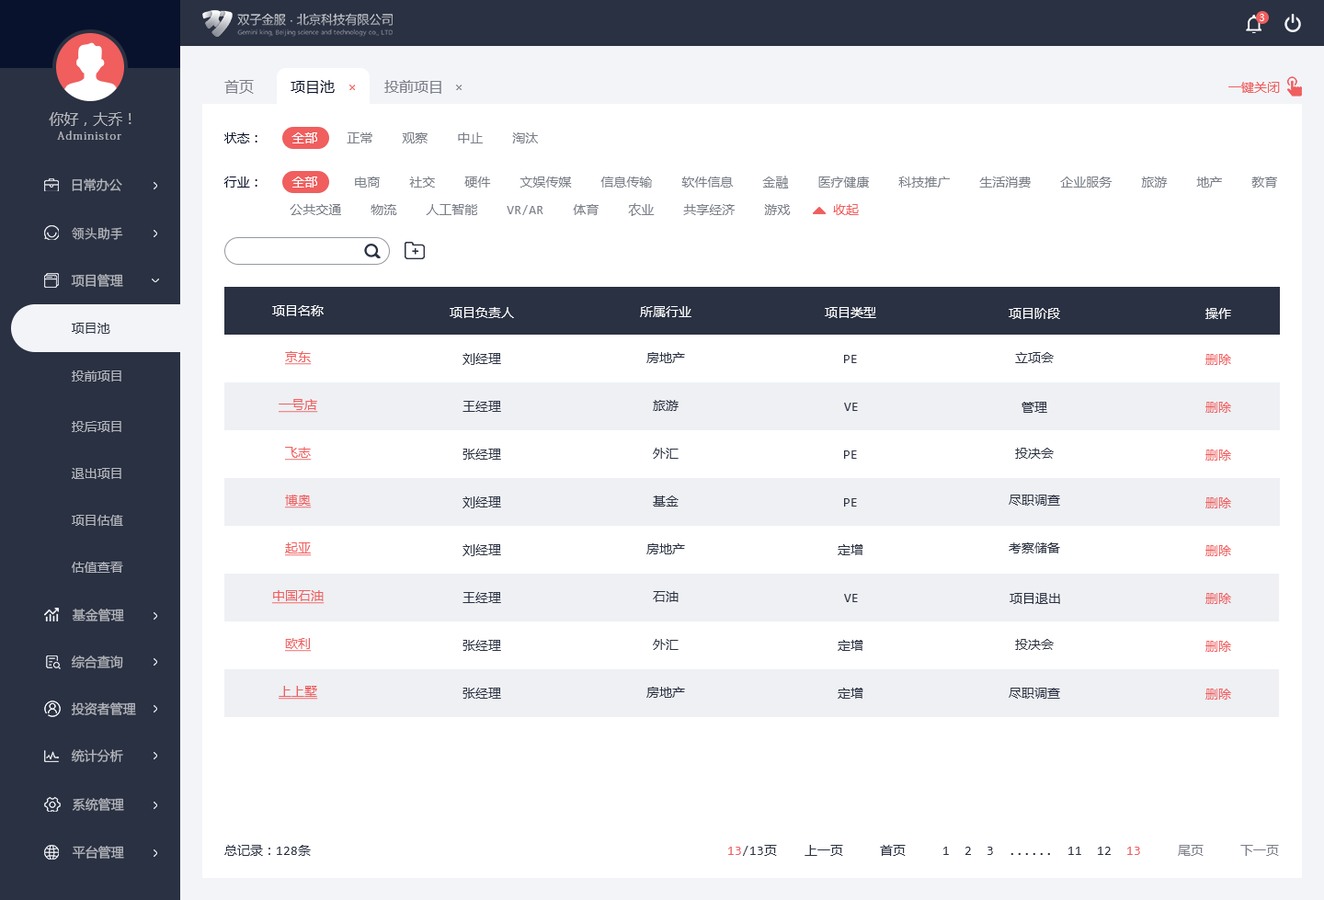
<style>
.page{position:relative;width:1324px;height:900px;background:#ffffff}
.page>*{position:absolute;margin:0}
.t1{font:9.2px "MicrosoftYaHeiUI";color:#ffffff}
.t2{font:14.7px "MicrosoftYaHeiMono";color:#7b7f88}
.t3{font:14.7px "MicrosoftYaHeiMono";color:#08122c}
.t4{font:12.9px "MicrosoftYaHeiMono";color:#f05e5e}
.t5{font:14.7px "MicrosoftYaHeiMono";color:#b4b7bd}
.t6{font:11px "AdobeFangsongStd-Regular";letter-spacing:0.1em;color:#b4b7bd}
.t7{font:12.9px "MicrosoftYaHeiMono";color:#7b7f88}
.t8{font:12.9px "MicrosoftYaHeiMono";color:#08122c}
.t9{font:12.9px "MicrosoftYaHeiMono";color:#ffffff}
.t10{font:12.9px "MicrosoftYaHeiUI";color:#b4b7bd}
.t11{font:12.9px/27.6px "MicrosoftYaHeiMono";color:#7b7f88}
.t12{font:12.9px/27.6px "MicrosoftYaHeiMono";color:#08122c}
.t13{font:12.9px/27.6px "MicrosoftYaHeiMono";color:#ffffff}
.t14{font:12.9px "PingFang-SC-Medium";color:#b4b7bd}
.t15{font:12.9px "MicrosoftYaHeiUI";color:#2a3142}
.t16{font:12.9px "MicrosoftYaHeiMono";color:#f05e5e;text-decoration:underline}
.t17{font:12.9px "MicrosoftYaHeiMono";color:#2a3142}
</style>
<div class="page">
<p class="t1" style="left:1260px;top:14px;width:5px;height:7px">3</p>
<p class="t2" style="left:224px;top:80px;width:30px;height:14px">首页</p>
<p class="t3" style="left:291px;top:80px;width:44px;height:14px">项目池</p>
<p class="t2" style="left:384px;top:80px;width:57px;height:14px">投前项目</p>
<p class="t4" style="left:1229px;top:82px;width:51px;height:11px">一键关闭</p>
<p class="t5" style="left:49px;top:112px;width:83px;height:14px">你好，大乔！</p>
<p class="t6" style="left:57px;top:131px;width:64px;height:9px">Administor</p>
<p class="t7" style="left:224px;top:132px;width:314px;height:11px"><span class="t8">状态：    </span><span class="t9">全部    </span>正常    观察    中止    淘汰</p>
<p class="t10" style="left:72px;top:178px;width:50px;height:13px">日常办公</p>
<p class="t11" style="left:224px;top:176px;width:1053px;height:40px"><span class="t12">行业：    </span><span class="t13">全部     </span>电商    社交    硬件    文娱传媒    信息传输    软件信息    金融    医疗健康    科技推广    生活消费    企业服务    旅游    地产    教育<br>         公共交通    物流    人工智能    VR/AR    体育    农业    共享经济    游戏</p>
<p class="t4" style="left:833px;top:204px;width:26px;height:11px">收起</p>
<p class="t14" style="left:72px;top:227px;width:51px;height:13px">领头助手</p>
<p class="t10" style="left:71px;top:274px;width:52px;height:14px">项目管理</p>
<p class="t9" style="left:272px;top:305px;width:52px;height:11px">项目名称</p>
<p class="t9" style="left:450px;top:307px;width:64px;height:11px">项目负责人</p>
<p class="t9" style="left:640px;top:306px;width:52px;height:11px">所属行业</p>
<p class="t9" style="left:825px;top:307px;width:51px;height:11px">项目类型</p>
<p class="t9" style="left:1009px;top:308px;width:51px;height:11px">项目阶段</p>
<p class="t9" style="left:1206px;top:308px;width:25px;height:11px">操作</p>
<p class="t15" style="left:72px;top:323px;width:38px;height:11px">项目池</p>
<p class="t16" style="left:285px;top:351px;width:27px;height:14px">京东</p>
<p class="t17" style="left:463px;top:353px;width:38px;height:12px">刘经理</p>
<p class="t17" style="left:647px;top:352px;width:38px;height:11px">房地产</p>
<p class="t17" style="left:1015px;top:352px;width:39px;height:11px">立项会</p>
<p class="t17" style="left:844px;top:355px;width:13px;height:8px">PE</p>
<p class="t4" style="left:1206px;top:354px;width:25px;height:11px">删除</p>
<p class="t10" style="left:72px;top:371px;width:49px;height:11px">投前项目</p>
<p class="t16" style="left:279px;top:399px;width:39px;height:14px">一号店</p>
<p class="t17" style="left:463px;top:401px;width:38px;height:11px">王经理</p>
<p class="t17" style="left:653px;top:400px;width:26px;height:11px">旅游</p>
<p class="t17" style="left:1022px;top:402px;width:26px;height:11px">管理</p>
<p class="t4" style="left:1206px;top:402px;width:25px;height:11px">删除</p>
<p class="t17" style="left:844px;top:403px;width:14px;height:8px">VE</p>
<p class="t10" style="left:72px;top:421px;width:49px;height:11px">投后项目</p>
<p class="t16" style="left:285px;top:447px;width:27px;height:14px">飞志</p>
<p class="t17" style="left:463px;top:449px;width:38px;height:11px">张经理</p>
<p class="t17" style="left:653px;top:448px;width:26px;height:11px">外汇</p>
<p class="t17" style="left:1015px;top:448px;width:39px;height:11px">投决会</p>
<p class="t4" style="left:1206px;top:450px;width:25px;height:11px">删除</p>
<p class="t17" style="left:844px;top:451px;width:13px;height:8px">PE</p>
<p class="t10" style="left:72px;top:468px;width:49px;height:11px">退出项目</p>
<p class="t16" style="left:285px;top:495px;width:27px;height:14px">博奥</p>
<p class="t17" style="left:463px;top:497px;width:38px;height:12px">刘经理</p>
<p class="t17" style="left:653px;top:496px;width:26px;height:11px">基金</p>
<p class="t17" style="left:1009px;top:495px;width:51px;height:11px">尽职调查</p>
<p class="t4" style="left:1206px;top:498px;width:25px;height:11px">删除</p>
<p class="t17" style="left:844px;top:498px;width:13px;height:9px">PE</p>
<p class="t10" style="left:72px;top:515px;width:51px;height:11px">项目估值</p>
<p class="t16" style="left:285px;top:543px;width:27px;height:13px">起亚</p>
<p class="t17" style="left:463px;top:544px;width:38px;height:12px">刘经理</p>
<p class="t17" style="left:647px;top:544px;width:38px;height:11px">房地产</p>
<p class="t17" style="left:838px;top:544px;width:26px;height:11px">定增</p>
<p class="t17" style="left:1009px;top:543px;width:51px;height:11px">考察储备</p>
<p class="t4" style="left:1206px;top:545px;width:25px;height:11px">删除</p>
<p class="t10" style="left:72px;top:562px;width:51px;height:11px">估值查看</p>
<p class="t16" style="left:272px;top:590px;width:53px;height:14px">中国石油</p>
<p class="t17" style="left:463px;top:592px;width:38px;height:11px">王经理</p>
<p class="t17" style="left:653px;top:591px;width:26px;height:11px">石油</p>
<p class="t17" style="left:1010px;top:593px;width:50px;height:11px">项目退出</p>
<p class="t4" style="left:1206px;top:593px;width:25px;height:11px">删除</p>
<p class="t17" style="left:844px;top:594px;width:14px;height:8px">VE</p>
<p class="t10" style="left:72px;top:609px;width:52px;height:13px">基金管理</p>
<p class="t16" style="left:285px;top:638px;width:27px;height:14px">欧利</p>
<p class="t17" style="left:463px;top:640px;width:38px;height:11px">张经理</p>
<p class="t17" style="left:653px;top:639px;width:26px;height:11px">外汇</p>
<p class="t17" style="left:838px;top:640px;width:26px;height:11px">定增</p>
<p class="t17" style="left:1015px;top:639px;width:39px;height:11px">投决会</p>
<p class="t4" style="left:1206px;top:641px;width:25px;height:11px">删除</p>
<p class="t10" style="left:71px;top:656px;width:52px;height:14px">综合查询</p>
<p class="t16" style="left:279px;top:686px;width:39px;height:14px">上上墅</p>
<p class="t17" style="left:463px;top:688px;width:38px;height:11px">张经理</p>
<p class="t17" style="left:647px;top:687px;width:38px;height:11px">房地产</p>
<p class="t17" style="left:838px;top:688px;width:26px;height:11px">定增</p>
<p class="t17" style="left:1009px;top:688px;width:51px;height:11px">尽职调查</p>
<p class="t4" style="left:1206px;top:689px;width:25px;height:11px">删除</p>
<p class="t10" style="left:71px;top:703px;width:65px;height:13px">投资者管理</p>
<p class="t10" style="left:71px;top:750px;width:52px;height:12px">统计分析</p>
<p class="t10" style="left:72px;top:798px;width:52px;height:13px">系统管理</p>
<p class="t17" style="left:224px;top:845px;width:87px;height:11px">总记录：128条</p>
<p class="t17" style="left:728px;top:845px;width:49px;height:11px"><span class="t4">13</span>/13页</p>
<p class="t17" style="left:805px;top:845px;width:474px;height:11px">上一页     首页     1  2  3  ......  11  12  <span class="t4">13     </span><span class="t7">尾页     下一页</span></p>
<p class="t10" style="left:72px;top:846px;width:52px;height:13px">平台管理</p>
</div>
